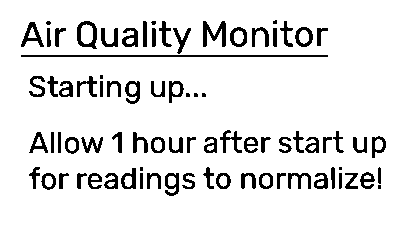
<style>
.page{position:relative;width:416px;height:240px;background:#ffffff}
.page>*{position:absolute;margin:0}
.t1{font:36px "RubikLight-Regular";color:#000000}
.t2{font:30px "RubikLight-Regular";color:#000000}
</style>
<div class="page">
<p class="t1" style="left:20px;top:20px;width:308px;height:34px">Air Quality Monitor</p>
<p class="t2" style="left:29px;top:75px;width:177px;height:29px">Starting up...</p>
<p class="t2" style="left:29px;top:130px;width:357px;height:66px">Allow 1 hour after start up<br>for readings to normalize!</p>
</div>
